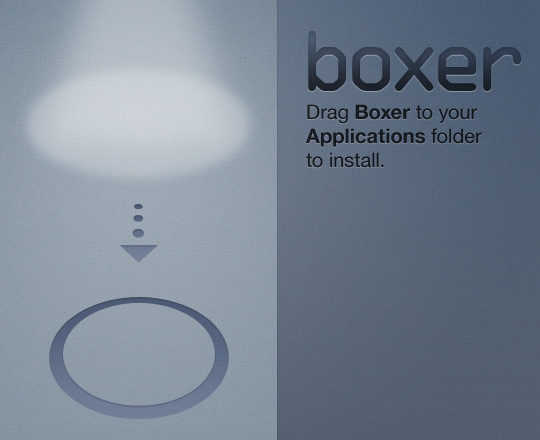
<style>
.page{position:relative;width:540px;height:440px}
.page>*{position:absolute;margin:0}
.t1{font:81.3px "OCRAStd";letter-spacing:-0.19em}
.t2{font:81.3px "OCRAStd";letter-spacing:-0.18em}
.t3{font:81.3px "OCRAStd";letter-spacing:-0.16em}
.t4{font:20px "HelveticaNeue";color:#15181c}
.t5{font:20px "HelveticaNeue-Bold";color:#15181c}
</style>
<div class="page">
<p class="t1" style="left:308px;top:31px;width:213px;height:60px"><span class="t2">b</span>ox<span class="t3">e</span><span class="t2">r</span></p>
<p class="t4" style="left:306px;top:104px;width:176px;height:64px">Drag <span class="t5">Boxer</span> to your<br><span class="t5">Applications </span>folder<br>to install.</p>
</div>
